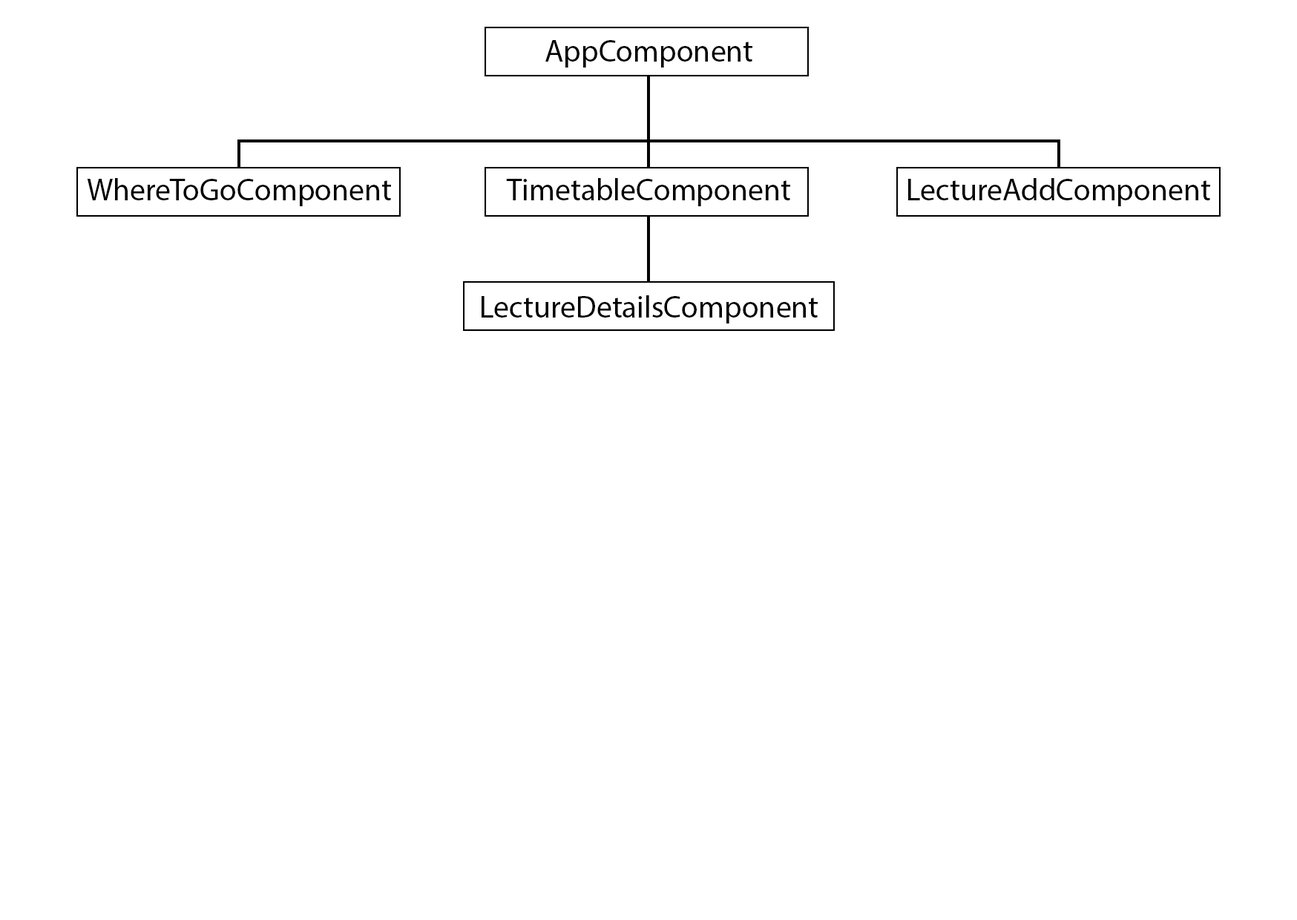
<style>
.page{position:relative;width:1297px;height:920px;background:#ffffff}
.page>*{position:absolute;margin:0}
.t1{font:30.9px "MyriadPro-Regular";color:#000000}
</style>
<div class="page">
<p class="t1" style="left:545px;top:40px;width:207px;height:27px">AppComponent</p>
<p class="t1" style="left:87px;top:178px;width:304px;height:28px">WhereToGoComponent</p>
<p class="t1" style="left:506px;top:178px;width:284px;height:28px">TimetableComponent</p>
<p class="t1" style="left:908px;top:178px;width:302px;height:28px">LectureAddComponent</p>
<p class="t1" style="left:481px;top:295px;width:336px;height:28px">LectureDetailsComponent</p>
</div>
